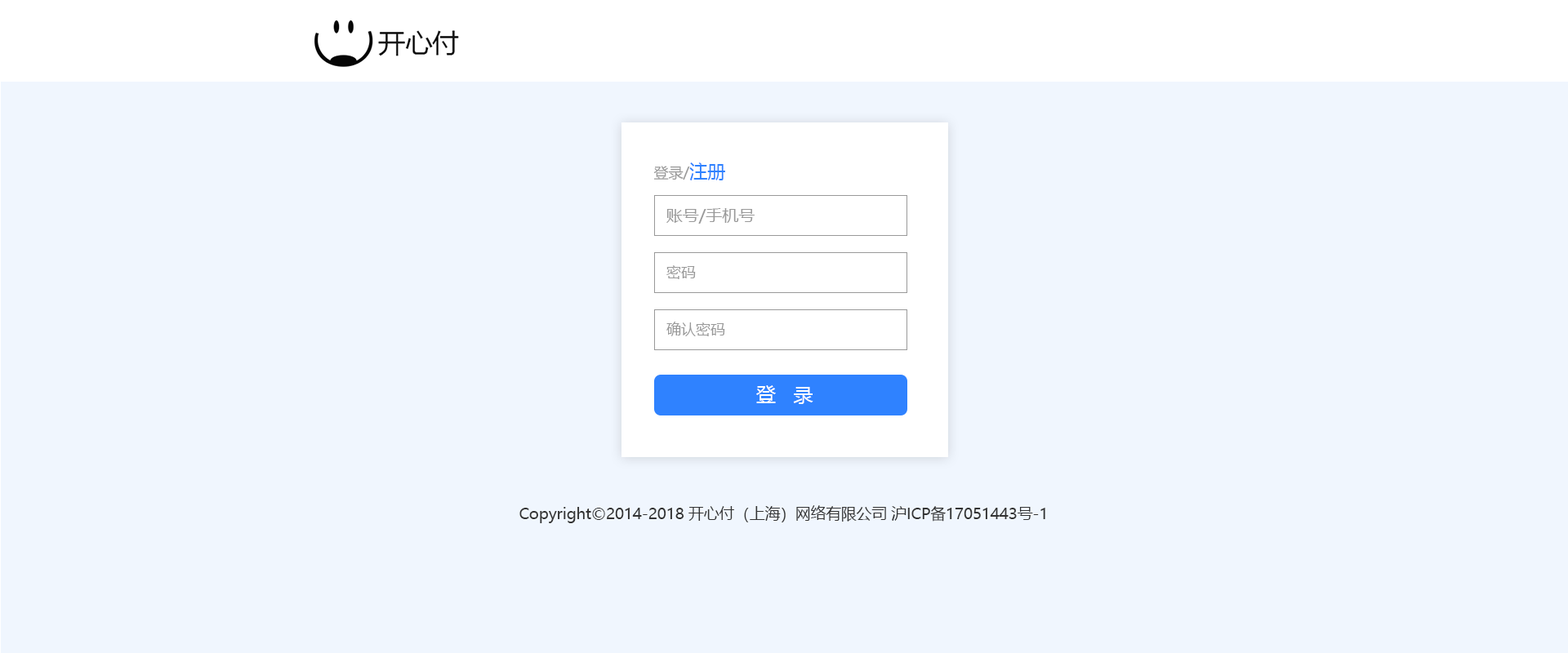
<style>
.page{position:relative;width:1568px;height:653px;background:#f0f6fe}
.page>*{position:absolute;margin:0}
.t1{font:14.7px "MicrosoftYaHei";color:#999999}
.t2{font:18px "MicrosoftYaHei";color:#2f82ff}
.t3{font:16.3px "MicrosoftYaHei";color:#999999}
.t4{font:19.6px "MicrosoftYaHei";color:#ffffff}
.t5{font:15.2px "MicrosoftYaHei";color:#333333}
</style>
<div class="page">
<p class="t1" style="left:653px;top:163px;width:72px;height:17px">登录/<span class="t2">注册</span></p>
<p class="t3" style="left:666px;top:208px;width:89px;height:16px">账号/手机号</p>
<p class="t1" style="left:666px;top:265px;width:30px;height:14px">密码</p>
<p class="t1" style="left:666px;top:322px;width:59px;height:14px">确认密码</p>
<p class="t4" style="left:756px;top:385px;width:57px;height:19px">登   录</p>
<p class="t5" style="left:519px;top:506px;width:526px;height:17px">Copyright©2014-2018 开心付（上海）网络有限公司 沪ICP备17051443号-1</p>
</div>
